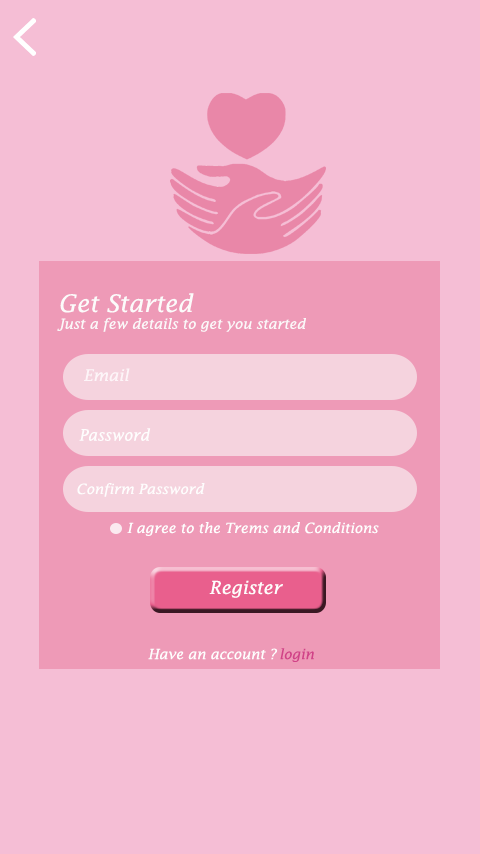
<style>
.page{position:relative;width:480px;height:854px;background:#f5bed5}
.page>*{position:absolute;margin:0}
.t1{font:14px "LucidaFax-Italic";color:#fbf8f9}
.t2{font:24px "LucidaFax-Italic";color:#fcfbfb}
.t3{font:16px "LucidaFax-Italic";color:#fdf5f8}
.t4{font:15.9px "LucidaFax-Italic";color:#fefdfd;scale:0.95 1}
.t5{font:14px "LucidaFax-Italic";color:#fefdfd}
.t6{font:14px "LucidaFax-Italic";color:#fefefe}
.t7{font:18px "LucidaFax-Italic";color:#fefdfd}
.t8{font:14.1px "LucidaFax-Italic";color:#fefefe}
.t9{font:14.1px "LucidaFax-Italic";color:#d14288}
</style>
<div class="page">
<p class="t1" style="left:57px;top:293px;width:249px;height:39px"><span class="t2">Get Started<br></span>Just a few details to get you started</p>
<p class="t3" style="left:84px;top:368px;width:46px;height:14px">Email</p>
<p class="t4" style="left:79px;top:428px;width:72px;height:13px">Password</p>
<p class="t5" style="left:77px;top:483px;width:128px;height:14px">Confirm Password</p>
<p class="t6" style="left:127px;top:522px;width:252px;height:14px">I agree to the Trems and Conditions</p>
<p class="t7" style="left:209px;top:580px;width:74px;height:18px">Register</p>
<p class="t8" style="left:148px;top:648px;width:130px;height:12px">Have an account ?</p>
<p class="t9" style="left:280px;top:648px;width:34px;height:14px">login</p>
</div>
